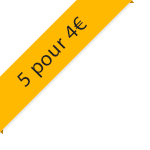
<style>
.page{position:relative;width:150px;height:150px;background:#ffffff}
.page>*{position:absolute;margin:0}
.t1{font:21px "MyriadPro-Regular";letter-spacing:0.03em;color:#222222}
</style>
<div class="page">
<p class="t1" style="left:17px;top:16px;width:70px;height:71px;rotate:-45deg">5 pour 4€</p>
</div>
